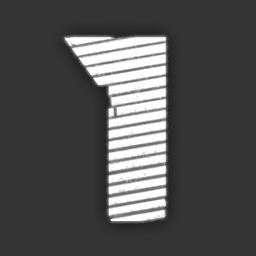
<style>
.page{position:relative;width:256px;height:256px;background:#333333}
.page>*{position:absolute;margin:0}
.t1{font:254.7px "Ethnocentric";letter-spacing:0.05em;color:#ffffff}
</style>
<div class="page">
<p class="t1" style="left:63px;top:37px;width:103px;height:184px">1</p>
</div>
